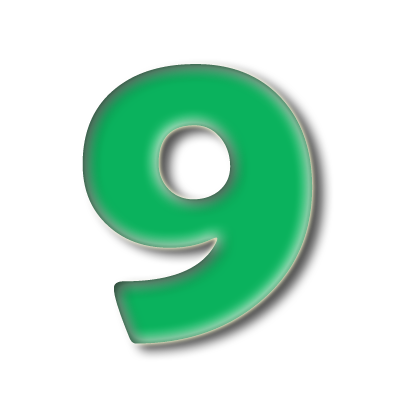
<style>
.page{position:relative;width:400px;height:400px;background:#ffffff}
.page>*{position:absolute;margin:0}
.t1{font:446px "BerlinSansFBDemi-Bold";color:#0ab25d}
</style>
<div class="page">
<p class="t1" style="left:82px;top:64px;width:231px;height:280px">9</p>
</div>
